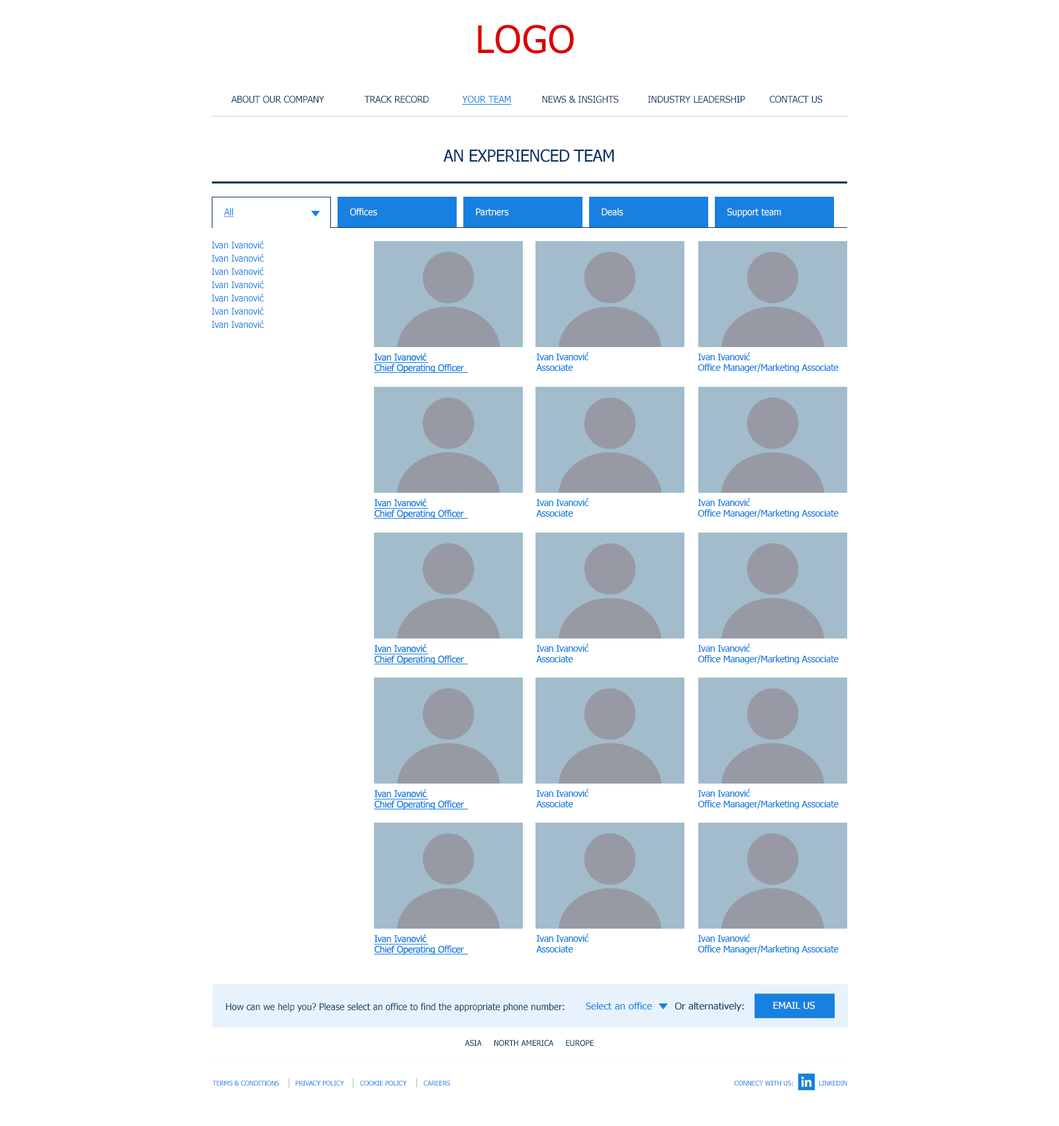
<style>
.page{position:relative;width:1059px;height:1126px;background:#ffffff}
.page>*{position:absolute;margin:0}
.t1{font:37.9px "Tahoma";letter-spacing:0.02em;color:#dd0000}
.t2{font:9.3px "Tahoma";letter-spacing:-0.01em;color:#05345f}
.t3{font:9.3px "Tahoma";letter-spacing:-0.01em;color:#1880e1;text-decoration:underline}
.t4{font:16.6px "Tahoma";letter-spacing:-0.02em;color:#05345f}
.t5{font:9.3px "Tahoma";letter-spacing:-0.01em;color:#ffffff}
.t6{font:9.3px "Tahoma";letter-spacing:-0.02em;color:#1880e1}
.t7{font:9.3px/10.6px "Tahoma";letter-spacing:-0.02em;color:#1880e1}
.t8{font:9.3px "Tahoma";letter-spacing:-0.01em;color:#1880e1;scale:1.09 1}
.t9{font:9.3px "Tahoma";letter-spacing:-0.01em;color:#05345f;scale:1.09 1}
.t10{font:9.3px "Tahoma";letter-spacing:-0.02em;color:#ffffff;scale:1.09 1}
.t11{font:8px "Tahoma";letter-spacing:-0.01em;color:#05345f}
.t12{font:6.6px "Tahoma";letter-spacing:-0.01em;color:#1880e1}
</style>
<div class="page">
<p class="t1" style="left:478px;top:24px;width:96px;height:30px">LOGO</p>
<p class="t2" style="left:231px;top:95px;width:93px;height:8px">ABOUT OUR COMPANY</p>
<p class="t2" style="left:364px;top:95px;width:65px;height:8px">TRACK RECORD</p>
<p class="t3" style="left:462px;top:95px;width:50px;height:10px">YOUR TEAM</p>
<p class="t2" style="left:542px;top:95px;width:77px;height:8px">NEWS &amp; INSIGHTS</p>
<p class="t2" style="left:648px;top:95px;width:98px;height:8px">INDUSTRY LEADERSHIP</p>
<p class="t2" style="left:770px;top:95px;width:53px;height:8px">CONTACT US</p>
<p class="t4" style="left:444px;top:149px;width:170px;height:13px">AN EXPERIENCED TEAM</p>
<p class="t3" style="left:224px;top:208px;width:10px;height:9px">All</p>
<p class="t5" style="left:350px;top:208px;width:27px;height:8px">Offices</p>
<p class="t5" style="left:476px;top:208px;width:33px;height:8px">Partners</p>
<p class="t5" style="left:602px;top:208px;width:22px;height:8px">Deals</p>
<p class="t5" style="left:728px;top:208px;width:53px;height:9px">Support team</p>
<p class="t6" style="left:212px;top:240px;width:52px;height:9px">Ivan Ivanović</p>
<p class="t6" style="left:212px;top:254px;width:52px;height:8px">Ivan Ivanović</p>
<p class="t6" style="left:212px;top:267px;width:52px;height:8px">Ivan Ivanović</p>
<p class="t6" style="left:212px;top:280px;width:52px;height:9px">Ivan Ivanović</p>
<p class="t6" style="left:212px;top:293px;width:52px;height:9px">Ivan Ivanović</p>
<p class="t6" style="left:212px;top:307px;width:52px;height:8px">Ivan Ivanović</p>
<p class="t6" style="left:212px;top:320px;width:52px;height:8px">Ivan Ivanović</p>
<p class="t7" style="left:374px;top:352px;width:90px;height:21px">Ivan Ivanović<br>Chief Operating Officer</p>
<p class="t7" style="left:536px;top:352px;width:53px;height:19px">Ivan Ivanović<br>Associate</p>
<p class="t7" style="left:698px;top:352px;width:141px;height:21px">Ivan Ivanović<br>Office Manager/Marketing Associate</p>
<p class="t7" style="left:374px;top:498px;width:90px;height:21px">Ivan Ivanović<br>Chief Operating Officer</p>
<p class="t7" style="left:536px;top:498px;width:53px;height:18px">Ivan Ivanović<br>Associate</p>
<p class="t7" style="left:698px;top:498px;width:141px;height:20px">Ivan Ivanović<br>Office Manager/Marketing Associate</p>
<p class="t7" style="left:374px;top:644px;width:90px;height:21px">Ivan Ivanović<br>Chief Operating Officer</p>
<p class="t7" style="left:536px;top:644px;width:53px;height:18px">Ivan Ivanović<br>Associate</p>
<p class="t7" style="left:698px;top:644px;width:141px;height:20px">Ivan Ivanović<br>Office Manager/Marketing Associate</p>
<p class="t7" style="left:374px;top:789px;width:90px;height:21px">Ivan Ivanović<br>Chief Operating Officer</p>
<p class="t7" style="left:536px;top:789px;width:53px;height:18px">Ivan Ivanović<br>Associate</p>
<p class="t7" style="left:698px;top:789px;width:141px;height:20px">Ivan Ivanović<br>Office Manager/Marketing Associate</p>
<p class="t7" style="left:374px;top:934px;width:90px;height:21px">Ivan Ivanović<br>Chief Operating Officer</p>
<p class="t7" style="left:536px;top:934px;width:53px;height:18px">Ivan Ivanović<br>Associate</p>
<p class="t7" style="left:698px;top:934px;width:141px;height:20px">Ivan Ivanović<br>Office Manager/Marketing Associate</p>
<p class="t8" style="left:586px;top:1002px;width:66px;height:8px">Select an office</p>
<p class="t9" style="left:675px;top:1002px;width:69px;height:9px">Or alternatively:</p>
<p class="t10" style="left:773px;top:1001px;width:42px;height:8px">EMAIL US</p>
<p class="t2" style="left:226px;top:1002px;width:339px;height:10px">How can we help you? Please select an office to find the appropriate phone number:</p>
<p class="t11" style="left:465px;top:1040px;width:129px;height:6px">ASIA     NORTH AMERICA     EUROPE</p>
<p class="t12" style="left:213px;top:1080px;width:66px;height:5px">TERMS &amp; CONDITIONS</p>
<p class="t12" style="left:295px;top:1080px;width:49px;height:5px">PRIVACY POLICY</p>
<p class="t12" style="left:360px;top:1080px;width:47px;height:5px">COOKIE POLICY</p>
<p class="t12" style="left:424px;top:1080px;width:27px;height:5px">CAREERS</p>
<p class="t12" style="left:734px;top:1080px;width:59px;height:5px">CONNECT WITH US:</p>
<p class="t12" style="left:819px;top:1080px;width:29px;height:5px">LINKEDIN</p>
</div>
